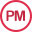
<style>
.page{position:relative;width:32px;height:32px;background:#ffffff}
.page>*{position:absolute;margin:0}
.t1{font:14.8px "ArialRoundedMTBold";letter-spacing:-0.095em;color:#c32842}
</style>
<div class="page">
<p class="t1" style="left:6px;top:10px;width:19px;height:11px">PM</p>
</div>
